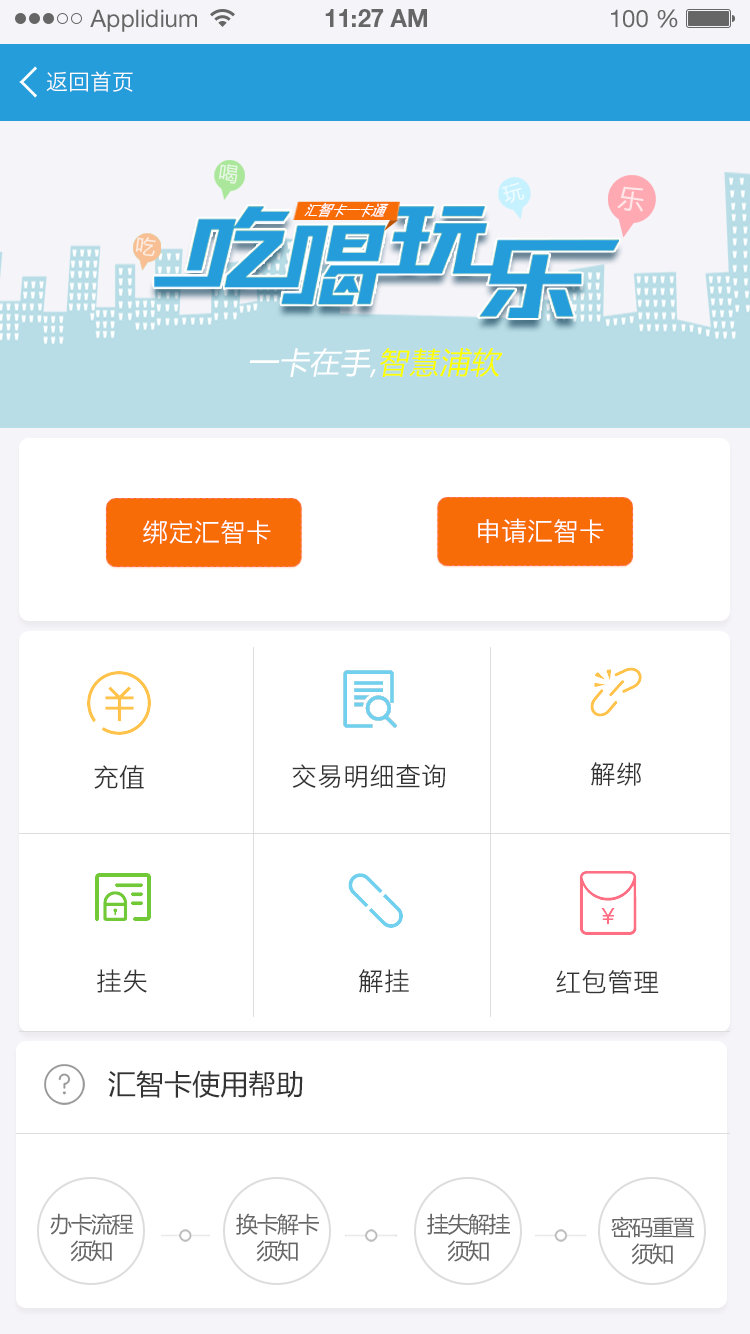
<style>
.page{position:relative;width:750px;height:1334px;background:#ffffff}
.page>*{position:absolute;margin:0}
.t1{font:24px "HelveticaNeueLTStd-Roman";color:#666666}
.t2{font:24px "HelveticaNeueLTStd-Bd";color:#666666}
.t3{font:22px "HiraginoSansGB-W3";color:#ffffff;text-transform:uppercase}
.t4{font:19.9px "MicrosoftYaHei";letter-spacing:0.02em;color:#e8f8e4}
.t5{font:19.9px "MicrosoftYaHei";letter-spacing:0.02em;color:#ffffff}
.t6{font:26.7px "MicrosoftYaHei";letter-spacing:0.02em;color:#ffffff}
.t7{font:15.8px "MicrosoftYaHei";letter-spacing:0.02em;color:#ffffff;scale:0.82 1}
.t8{font:20px "MicrosoftYaHei";letter-spacing:0.02em;color:#fdede2}
.t9{font:30px "MicrosoftYaHei";letter-spacing:0.02em;color:#ffffff;font-style:italic}
.t10{font:30px "MicrosoftYaHei";letter-spacing:0.02em;color:#fcff00;font-style:italic}
.t11{font:26px "HiraginoSansGB-W3";color:#ffffff;text-transform:uppercase}
.t12{font:26px "HiraginoSansGB-W3";color:#333333;text-transform:uppercase}
.t13{font:28px "MicrosoftYaHei";color:#333333;text-transform:uppercase}
.t14{font:22px "MicrosoftYaHei";letter-spacing:-0.065em;color:#666666}
</style>
<div class="page">
<p class="t1" style="left:90px;top:9px;width:107px;height:23px">Applidium</p>
<p class="t2" style="left:325px;top:9px;width:102px;height:18px">11:27 AM</p>
<p class="t1" style="left:611px;top:9px;width:67px;height:19px">100 %</p>
<p class="t3" style="left:46px;top:71px;width:87px;height:21px">返回首页</p>
<p class="t4" style="left:219px;top:164px;width:19px;height:20px;rotate:8deg">喝</p>
<p class="t5" style="left:501px;top:182px;width:24px;height:21px;rotate:-15deg;opacity:0.7">玩</p>
<p class="t6" style="left:617px;top:186px;width:27px;height:26px;rotate:8deg;opacity:0.7">乐</p>
<p class="t7" style="left:304px;top:202px;width:85px;height:16px">汇智卡一卡通</p>
<p class="t8" style="left:135px;top:237px;width:21px;height:20px;rotate:8deg">吃</p>
<p class="t9" style="left:249px;top:347px;width:254px;height:31px">一卡在手,<span class="t10">智慧浦软</span></p>
<p class="t11" style="left:143px;top:520px;width:128px;height:24px">绑定汇智卡</p>
<p class="t11" style="left:478px;top:518px;width:126px;height:25px">申请汇智卡</p>
<p class="t12" style="left:94px;top:765px;width:50px;height:25px">充值</p>
<p class="t12" style="left:292px;top:764px;width:154px;height:24px">交易明细查询</p>
<p class="t12" style="left:590px;top:762px;width:51px;height:24px">解绑</p>
<p class="t12" style="left:97px;top:969px;width:50px;height:24px">挂失</p>
<p class="t12" style="left:358px;top:969px;width:51px;height:24px">解挂</p>
<p class="t12" style="left:556px;top:970px;width:103px;height:24px">红包管理</p>
<p class="t13" style="left:108px;top:1070px;width:195px;height:28px">汇智卡使用帮助</p>
<p class="t14" style="left:50px;top:1213px;width:84px;height:49px;text-align:center">办卡流程<br>须知</p>
<p class="t14" style="left:236px;top:1213px;width:83px;height:49px;text-align:center">换卡解卡<br>须知</p>
<p class="t14" style="left:427px;top:1213px;width:83px;height:49px;text-align:center">挂失解挂<br>须知</p>
<p class="t14" style="left:611px;top:1216px;width:84px;height:49px;text-align:center">密码重置<br>须知</p>
</div>
